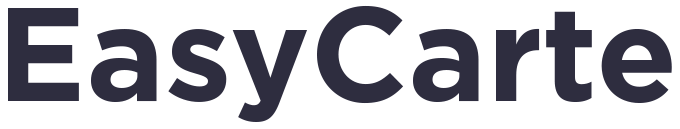
<style>
.page{position:relative;width:680px;height:129px;background:#ffffff}
.page>*{position:absolute;margin:0}
.t1{font:133.2px "Gotham-Bold";color:#2e2d3f}
</style>
<div class="page">
<p class="t1" style="left:8px;top:5px;width:664px;height:117px">EasyCarte</p>
</div>
